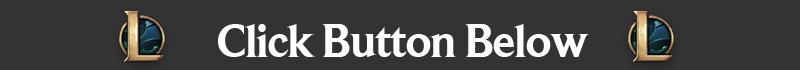
<style>
.page{position:relative;width:800px;height:70px;background:#333333}
.page>*{position:absolute;margin:0}
.t1{font:48px "BeaufortforLOL-Bold";letter-spacing:-0.038em;color:#ffffff}
</style>
<div class="page">
<p class="t1" style="left:218px;top:24px;width:371px;height:33px">Click Button Below</p>
</div>
